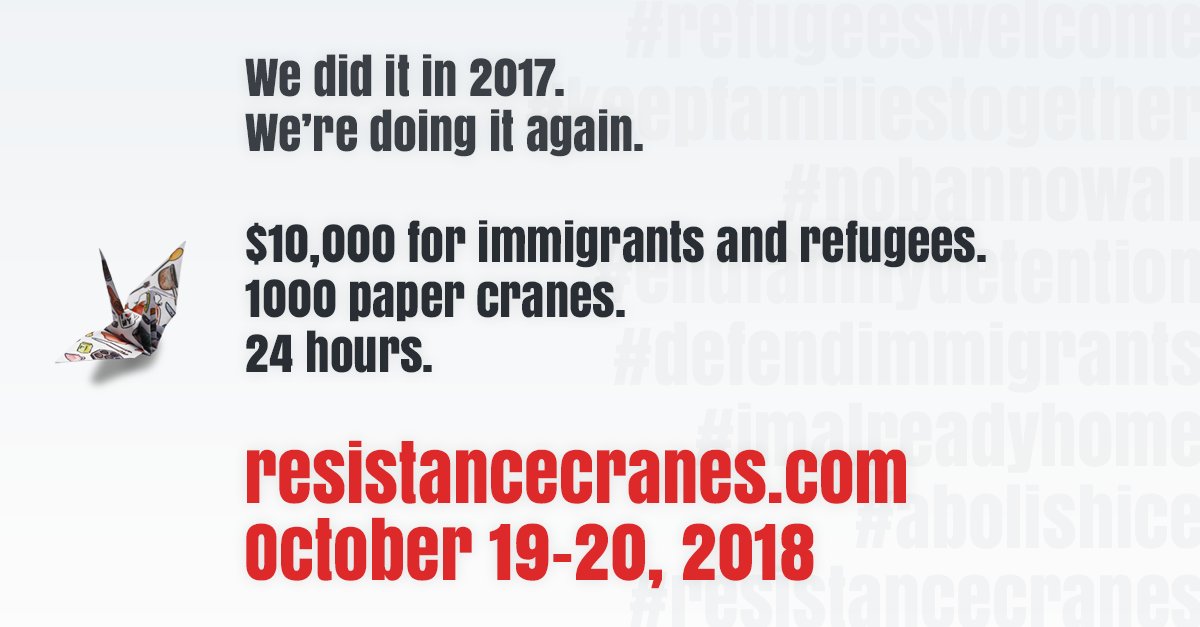
<style>
.page{position:relative;width:1200px;height:627px}
.page>*{position:absolute;margin:0}
.t1{font:48px/48px "Anton";color:#282e34}
.t2{font:48px/48px "Anton";color:#393f44}
.t3{font:72px "Anton";color:#dd2929}
</style>
<div class="page">
<p class="t1" style="left:245px;top:54px;width:741px;height:319px"><span class="t2">We did it in 2017.<br>We’re doing it again.<br></span><br>$10,000 for immigrants and refugees.<br>1000 paper cranes.<br>24 hours.</p>
<p class="t3" style="left:247px;top:440px;width:659px;height:64px">resistancecranes.com</p>
<p class="t3" style="left:246px;top:517px;width:568px;height:72px">October 19–20, 2018</p>
</div>
